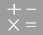
<style>
.page{position:relative;width:43px;height:35px;background:#9d9d9d}
.page>*{position:absolute;margin:0}
.t1{font:26px "HYQiHeiY4-CEW";color:#ffffff}
.t2{font:20px "HYQiHeiY4-CEW";color:#ffffff}
</style>
<div class="page">
<p class="t1" style="left:7px;top:4px;width:14px;height:11px">+</p>
<p class="t1" style="left:26px;top:8px;width:10px;height:2px">-</p>
<p class="t2" style="left:8px;top:19px;width:28px;height:12px">X =</p>
</div>
